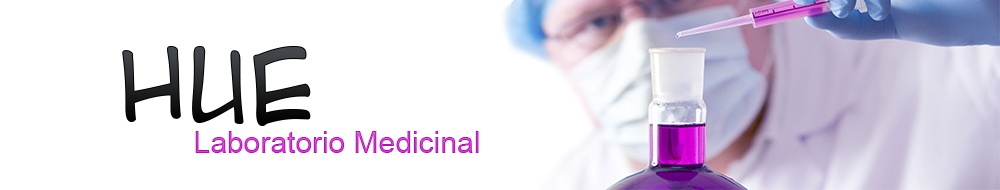
<style>
.page{position:relative;width:1000px;height:190px;background:#ffffff}
.page>*{position:absolute;margin:0}
.t1{font:99.9px "ACMESecretAgent"}
.t2{font:30px "ArialMT"}
</style>
<div class="page">
<p class="t1" style="left:122px;top:46px;width:189px;height:80px">Hue</p>
<p class="t2" style="left:195px;top:131px;width:284px;height:22px">Laboratorio Medicinal</p>
</div>
